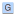
<style>
.page{position:relative;width:16px;height:16px;background:#ffffff}
.page>*{position:absolute;margin:0}
.t1{font:8.8px "HelveticaNeue";letter-spacing:-0.02em}
</style>
<div class="page">
<p class="t1" style="left:5px;top:4px;width:6px;height:7px">G</p>
</div>
